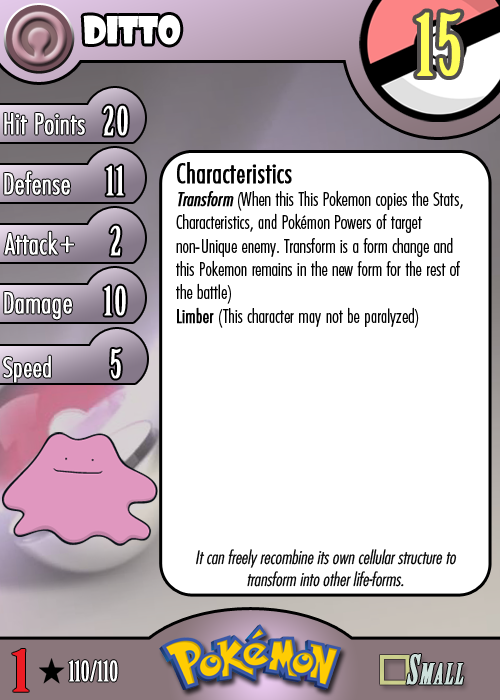
<style>
.page{position:relative;width:500px;height:700px;background:#ffffff}
.page>*{position:absolute;margin:0}
.t1{font:36.7px "ShowcardGothic-Reg";letter-spacing:-0.025em;color:#ffffff;scale:0.91 1}
.t2{font:83.3px "BirchStd";letter-spacing:0.025em;color:#fffd59;font-weight:bold}
.t3{font:27.8px "Futura-CondensedLight";color:#ffffff;font-weight:bold}
.t4{font:38.9px "BirchStd";letter-spacing:0.035em;color:#ffffff;font-weight:bold}
.t5{font:19.4px "FuturaCondensedBQ-Light";color:#010101}
.t6{font:27.8px "FuturaCondensedBQ-Light";color:#010101;font-weight:bold}
.t7{font:19.4px "FuturaCondensedBQ-Light";color:#010101;font-weight:bold;font-style:italic}
.t8{font:19.4px "FuturaCondensedBQ-Light";color:#010101;font-weight:bold}
.t9{font:30.6px "Futura-CondensedLight";color:#ffffff;font-weight:bold}
.t10{font:27.8px "FuturaCondensedBQ-Light";color:#ffffff;font-weight:bold}
.t11{font:18.1px "Futura-CondensedLight";color:#010101;font-style:italic}
.t12{font:55.6px "BirchStd";color:#ed1c24;font-weight:bold;scale:1.5 1}
.t13{font:27.8px "BirchStd";color:#ffffff;font-weight:bold}
</style>
<div class="page">
<p class="t1" style="left:83px;top:15px;width:98px;height:30px">ditto</p>
<p class="t2" style="left:416px;top:12px;width:45px;height:64px">15</p>
<p class="t3" style="left:4px;top:113px;width:81px;height:22px">Hit Points</p>
<p class="t4" style="left:103px;top:105px;width:25px;height:31px">20</p>
<p class="t3" style="left:4px;top:171px;width:66px;height:24px">Defense</p>
<p class="t4" style="left:106px;top:165px;width:18px;height:31px">11</p>
<p class="t5" style="left:176px;top:162px;width:287px;height:166px"><span class="t6">Characteristics<br></span><span class="t7">Transform</span> (When this This Pokemon copies the Stats, Characteristics, and Pokémon Powers of target non-Unique enemy. Transform is a form change and this Pokemon remains in the new form for the rest of the battle)<br><span class="t8">Limber</span> (This character may not be paralyzed)</p>
<p class="t3" style="left:4px;top:231px;width:54px;height:24px">Attack</p>
<p class="t4" style="left:110px;top:225px;width:11px;height:31px">2</p>
<p class="t9" style="left:60px;top:236px;width:14px;height:17px">+</p>
<p class="t3" style="left:4px;top:292px;width:68px;height:28px">Damage</p>
<p class="t4" style="left:104px;top:285px;width:22px;height:31px">10</p>
<p class="t4" style="left:111px;top:348px;width:10px;height:31px">5</p>
<p class="t10" style="left:3px;top:355px;width:48px;height:28px">Speed</p>
<p class="t11" style="left:196px;top:549px;width:261px;height:38px;text-align:center">It can freely recombine its own cellular structure to transform into other life-forms.</p>
<p class="t12" style="left:12px;top:649px;width:17px;height:43px">1</p>
<p class="t13" style="left:68px;top:660px;width:50px;height:22px">110/110</p>
</div>
